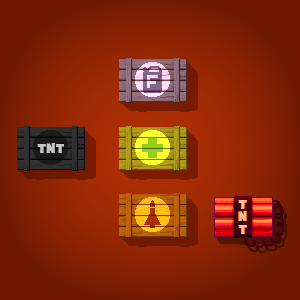
<style>
.page{position:relative;width:300px;height:300px}
.page>*{position:absolute;margin:0}
.t1{font:12.2px "CartoonistKooky";color:#c5c5c5;scale:1.2 1}
</style>
<div class="page">
<p class="t1" style="left:37px;top:143px;width:27px;height:10px">TNT</p>
</div>
